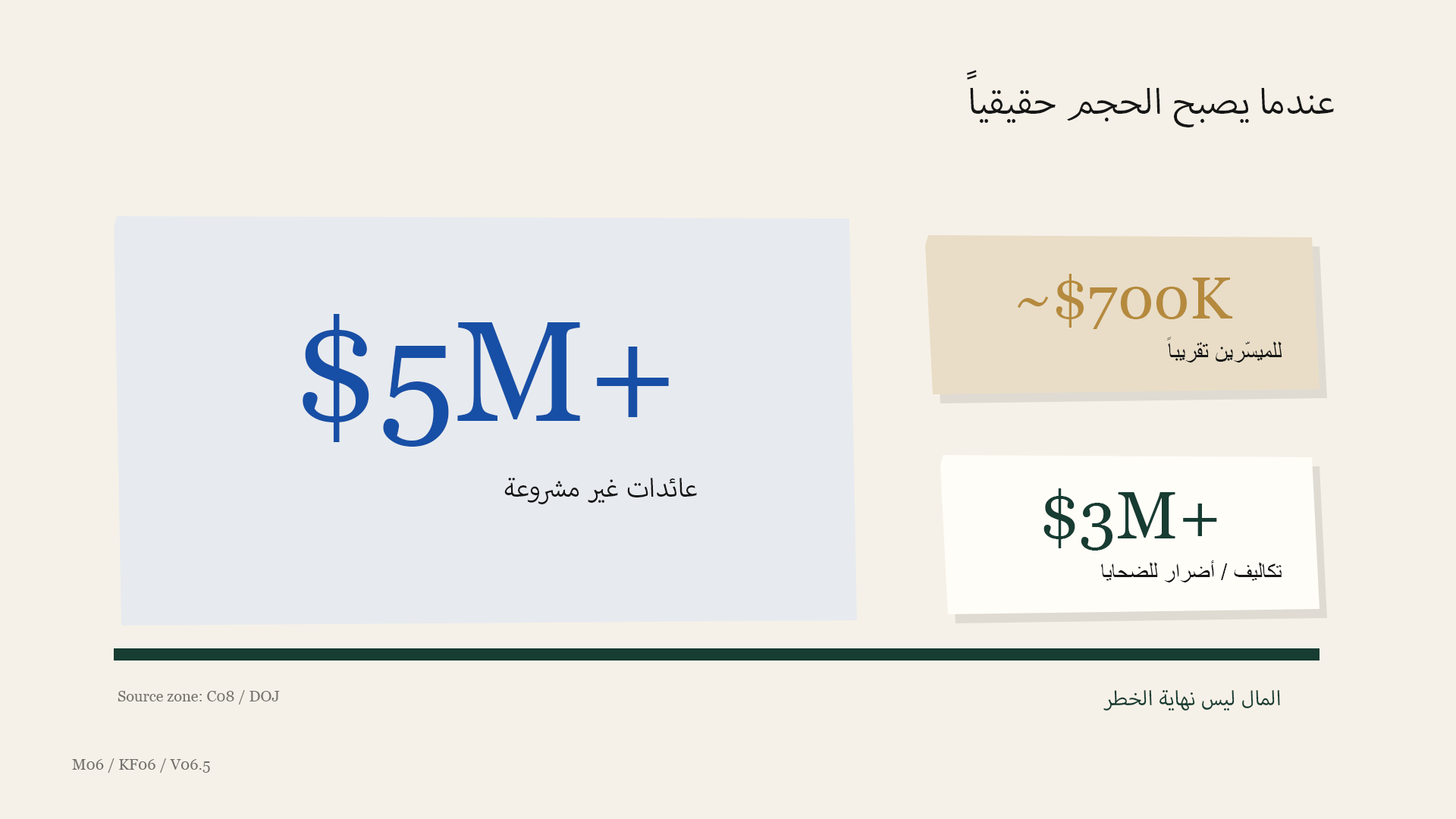
<style>
.page{position:relative;width:1456px;height:819px;background:#f6f1e8}
.page>*{position:absolute;margin:0}
.t1{font:50px "MyriadArabic-Regular";color:#151515}
.t2{font:59.1px "Georgia";color:#b58a3e}
.t3{font:142.6px "Georgia";color:#174fa6}
.t4{font:23.5px "ArialMT";color:#151515}
.t5{font:36.4px "MyriadArabic-Regular";color:#151515}
.t6{font:66.7px "Georgia";color:#173c32}
.t7{font:22.7px "ArialMT";color:#151515}
.t8{font:15.2px "Georgia";color:#75736f}
.t9{font:28.8px "MyriadArabic-Regular";color:#173c32}
.t10{font:15.2px "Georgia";color:#716f6b}
</style>
<div class="page">
<p class="t1" style="left:967px;top:70px;width:367px;height:57px">عندما يصبح الحجم حقيقياً</p>
<p class="t2" style="left:1018px;top:274px;width:215px;height:55px">~$700K</p>
<p class="t3" style="left:303px;top:314px;width:366px;height:133px">$5M+</p>
<p class="t4" style="left:1167px;top:337px;width:115px;height:25px">للميسّرين تقريباً</p>
<p class="t5" style="left:504px;top:478px;width:193px;height:26px">عائدات غير مشروعة</p>
<p class="t6" style="left:1043px;top:488px;width:174px;height:63px">$3M+</p>
<p class="t7" style="left:1100px;top:560px;width:182px;height:22px">تكاليف / أضرار للضحايا</p>
<p class="t8" style="left:118px;top:690px;width:162px;height:14px">Source zone: C08 / DOJ</p>
<p class="t9" style="left:1103px;top:690px;width:177px;height:21px">المال ليس نهاية الخطر</p>
<p class="t10" style="left:72px;top:758px;width:138px;height:15px">M06 / KF06 / V06.5</p>
</div>
